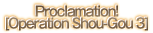
<style>
.page{position:relative;width:153px;height:33px;background:#ffffff}
.page>*{position:absolute;margin:0}
.t1{font:14px/12px "GothicMB101Pro-DeBold";letter-spacing:-0.08em;scale:0.9 1}
.t2{font:14px/12px "GothicMB101Pro-DeBold";letter-spacing:-0.08em;color:#816b53;scale:0.9 1}
</style>
<div class="page">
<p class="t1" style="left:5px;top:4px;width:142px;height:26px;text-align:center">Proclamation!<br>[Operation Shou-Gou 3]</p>
<p class="t2" style="left:6px;top:5px;width:142px;height:26px;text-align:center">Proclamation!<br>[Operation Shou-Gou 3]</p>
</div>
